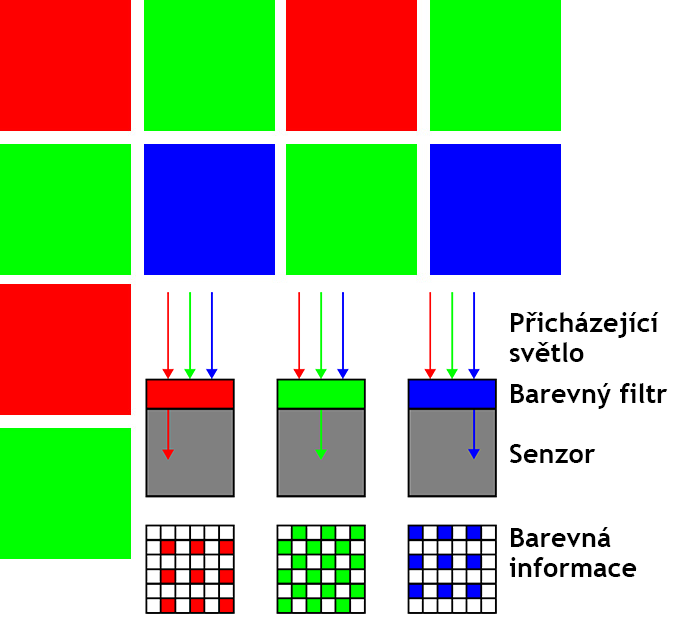
<style>
.page{position:relative;width:673px;height:619px;background:#ffffff}
.page>*{position:absolute;margin:0}
.t1{font:27px/30px "TrebuchetMS-Bold";color:#000000}
.t2{font:27px/11px "TrebuchetMS-Bold";color:#000000}
.t3{font:27px/54px "TrebuchetMS-Bold";color:#000000}
</style>
<div class="page">
<p class="t1" style="left:509px;top:312px;width:159px;height:265px">Přicházející světlo<br><br><span class="t2">Barevný filtr<br></span><br>Senzor<br><br><span class="t3">Barevná </span>informace</p>
</div>
